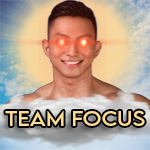
<style>
.page{position:relative;width:150px;height:150px}
.page>*{position:absolute;margin:0}
.t1{font:18.9px "LEMONMILK-Regular";color:#fada94;scale:1.1 1}
</style>
<div class="page">
<p class="t1" style="left:5px;top:110px;width:140px;height:16px">team focus</p>
</div>
